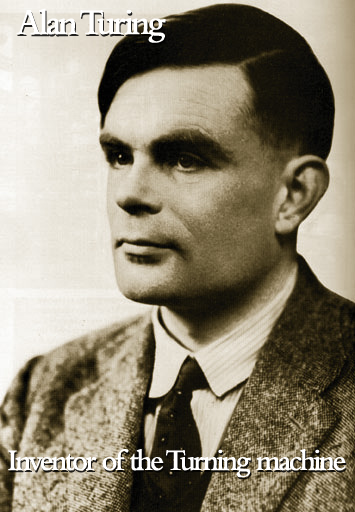
<style>
.page{position:relative;width:355px;height:512px}
.page>*{position:absolute;margin:0}
.t1{font:37.4px "BemboMT-SemiBold";letter-spacing:-0.08em;color:#ffffff;scale:0.95 1}
.t2{font:31.2px "BemboMT-SemiBold";letter-spacing:-0.08em;color:#ffffff;scale:0.95 1}
</style>
<div class="page">
<p class="t1" style="left:16px;top:8px;width:150px;height:35px">Alan Turing</p>
<p class="t2" style="left:8px;top:449px;width:338px;height:29px">Inventor of the Turning machine</p>
</div>
